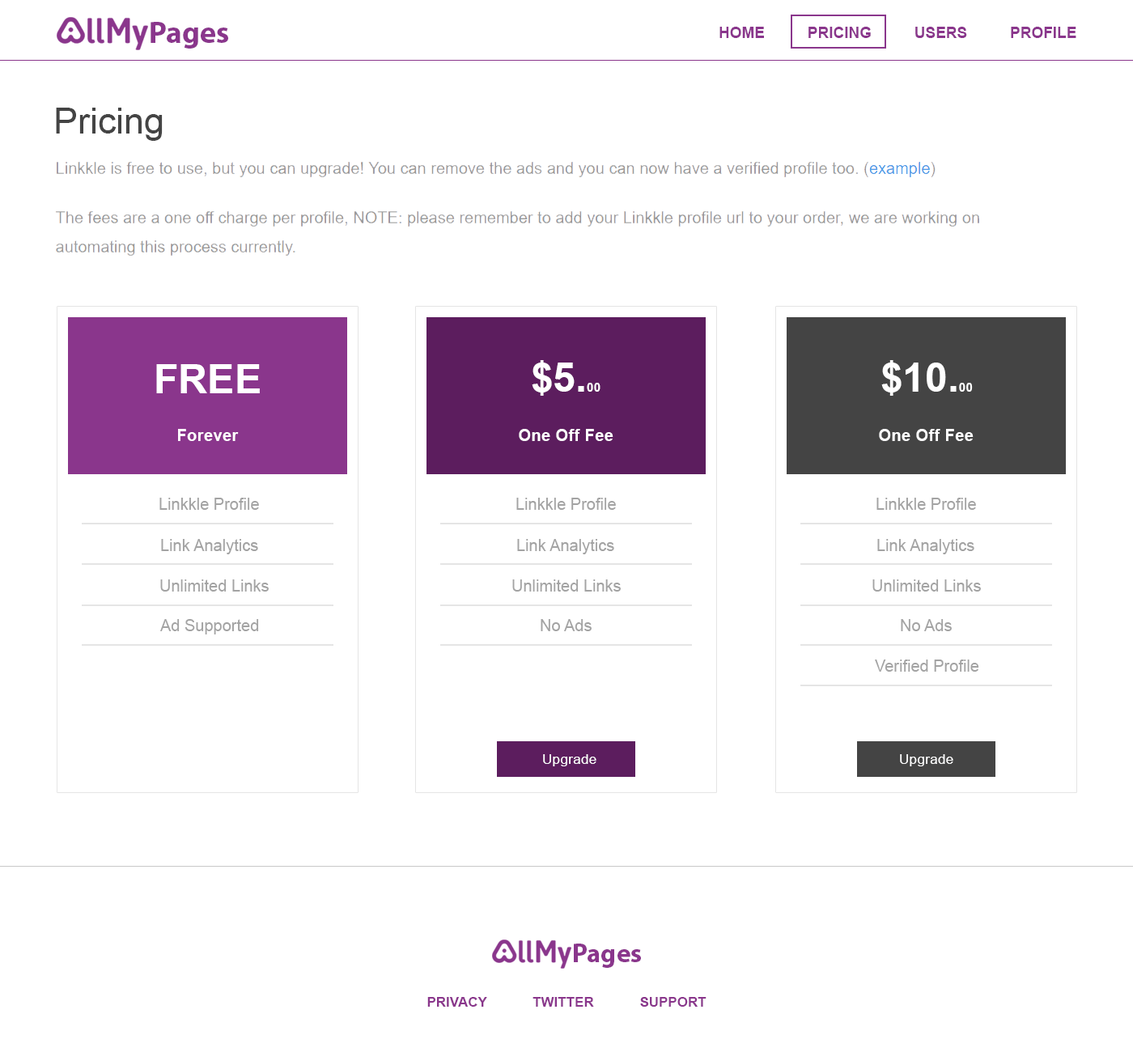
<style>
.page{position:relative;width:1133px;height:1052px;background:#ffffff}
.page>*{position:absolute;margin:0}
.t1{font:30.6px "MyriadPro-Bold";color:#8a368c}
.t2{font:15.4px "Arial-BoldMT";color:#8a368c}
.t3{font:36.4px "ArialMT";color:#444444}
.t4{font:40.5px "Arial-BoldMT";color:#ffffff}
.t5{font:12.1px "Arial-BoldMT";letter-spacing:0.02em;color:#ffffff}
.t6{font:16.2px "Arial-BoldMT";letter-spacing:0.02em;color:#ffffff}
.t7{font:16.2px "ArialMT";color:#a3a3a3}
.t8{font:13.8px "ArialMT";letter-spacing:0.02em;color:#ffffff}
.t9{font:26.8px "MyriadPro-Bold";color:#8a368c}
.t10{font:13.8px "Arial-BoldMT";color:#8a368c}
</style>
<div class="page">
<p class="t1" style="left:151px;top:22px;width:77px;height:27px">Pages</p>
<p class="t2" style="left:720px;top:27px;width:357px;height:11px">HOME          PRICING          USERS          PROFILE</p>
<p class="t3" style="left:56px;top:108px;width:107px;height:33px">Pricing</p>
<p class="t4" style="left:156px;top:364px;width:104px;height:29px">FREE</p>
<p class="t4" style="left:532px;top:360px;width:69px;height:36px">$5.<span class="t5">00</span></p>
<p class="t4" style="left:881px;top:360px;width:92px;height:36px">$10.<span class="t5">00</span></p>
<p class="t6" style="left:178px;top:429px;width:61px;height:12px">Forever</p>
<p class="t6" style="left:519px;top:429px;width:95px;height:12px">One Off Fee</p>
<p class="t6" style="left:879px;top:429px;width:95px;height:12px">One Off Fee</p>
<p class="t7" style="left:159px;top:498px;width:100px;height:12px">Linkkle Profile</p>
<p class="t7" style="left:516px;top:498px;width:100px;height:12px">Linkkle Profile</p>
<p class="t7" style="left:877px;top:498px;width:99px;height:12px">Linkkle Profile</p>
<p class="t7" style="left:161px;top:539px;width:97px;height:15px">Link Analytics</p>
<p class="t7" style="left:517px;top:539px;width:97px;height:15px">Link Analytics</p>
<p class="t7" style="left:877px;top:539px;width:98px;height:15px">Link Analytics</p>
<p class="t7" style="left:160px;top:580px;width:109px;height:12px">Unlimited Links</p>
<p class="t7" style="left:512px;top:580px;width:109px;height:12px">Unlimited Links</p>
<p class="t7" style="left:873px;top:580px;width:108px;height:12px">Unlimited Links</p>
<p class="t7" style="left:160px;top:619px;width:99px;height:16px">Ad Supported</p>
<p class="t7" style="left:541px;top:619px;width:51px;height:12px">No Ads</p>
<p class="t7" style="left:901px;top:619px;width:51px;height:12px">No Ads</p>
<p class="t7" style="left:875px;top:660px;width:104px;height:12px">Verified Profile</p>
<p class="t8" style="left:543px;top:754px;width:54px;height:13px">Upgrade</p>
<p class="t8" style="left:900px;top:754px;width:54px;height:13px">Upgrade</p>
<p class="t9" style="left:574px;top:944px;width:67px;height:24px">Pages</p>
<p class="t10" style="left:427px;top:997px;width:280px;height:10px">PRIVACY            TWITTER            SUPPORT</p>
</div>
